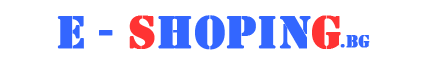
<style>
.page{position:relative;width:425px;height:65px;background:#ffffff}
.page>*{position:absolute;margin:0}
.t1{font:48px "Stencil";color:#3366ff;font-weight:bold}
.t2{font:48px "Stencil";color:#ff3333;font-weight:bold}
.t3{font:18px "Stencil";color:#3366ff;font-weight:bold}
</style>
<div class="page">
<p class="t1" style="left:57px;top:16px;width:56px;height:33px">E -</p>
<p class="t1" style="left:129px;top:15px;width:212px;height:35px"><span class="t2">s</span>hopin<span class="t2">g</span></p>
<p class="t3" style="left:340px;top:35px;width:30px;height:13px">.BG</p>
</div>
